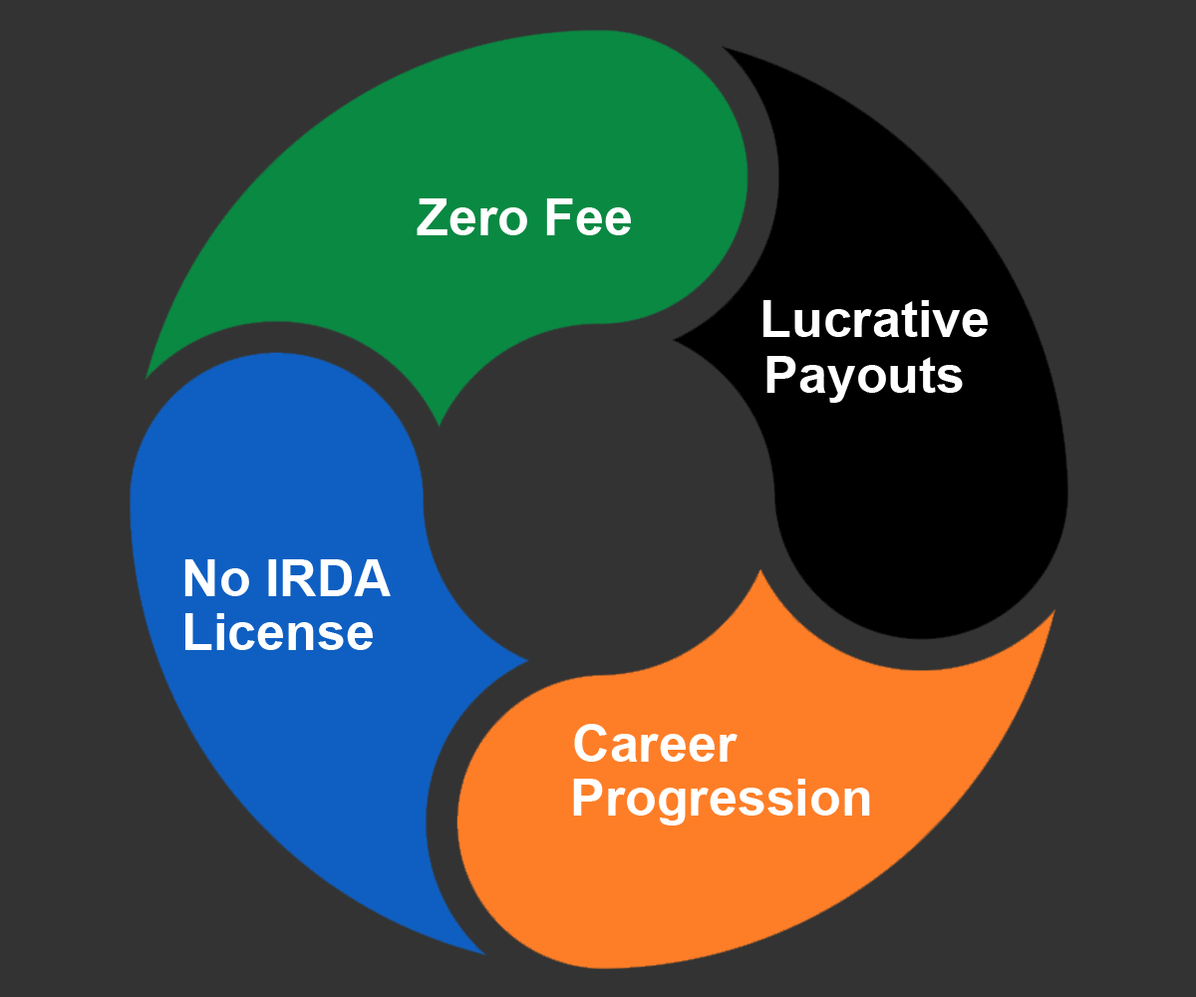
<style>
.page{position:relative;width:1196px;height:997px;background:#333333}
.page>*{position:absolute;margin:0}
.t1{font:51.8px "Arial-BoldMT";color:#ffffff}
</style>
<div class="page">
<p class="t1" style="left:417px;top:198px;width:214px;height:37px">Zero Fee</p>
<p class="t1" style="left:764px;top:300px;width:224px;height:37px">Lucrative</p>
<p class="t1" style="left:767px;top:356px;width:196px;height:47px">Payouts</p>
<p class="t1" style="left:184px;top:559px;width:207px;height:37px">No IRDA</p>
<p class="t1" style="left:185px;top:613px;width:188px;height:37px">License</p>
<p class="t1" style="left:574px;top:724px;width:164px;height:38px">Career</p>
<p class="t1" style="left:573px;top:779px;width:297px;height:46px">Progression</p>
</div>
